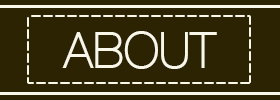
<style>
.page{position:relative;width:280px;height:100px;background:#2b2301}
.page>*{position:absolute;margin:0}
.t1{font:50px "Aliquam";color:#f9f7ea}
</style>
<div class="page">
<p class="t1" style="left:62px;top:31px;width:155px;height:38px">ABOUT</p>
</div>
